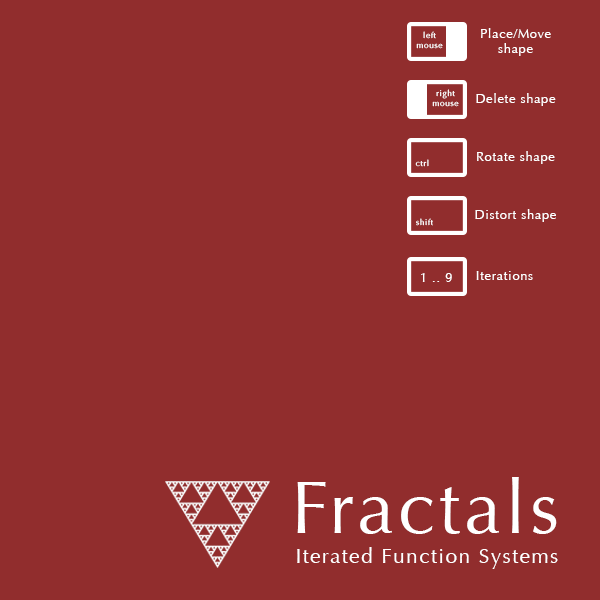
<style>
.page{position:relative;width:600px;height:600px;background:#912d2d}
.page>*{position:absolute;margin:0}
.t1{font:12.5px "Optima-Regular";letter-spacing:0.07em;color:#ffffff}
.t2{font:8.3px "Optima-Regular";letter-spacing:0.07em;color:#ffffff}
.t3{font:20.8px "Optima-Regular";letter-spacing:0.07em;color:#ffffff}
.t4{font:75px "Optima-Regular";letter-spacing:0.05em;color:#ffffff}
</style>
<div class="page">
<p class="t1" style="left:481px;top:28px;width:70px;height:28px;text-align:center">Place/Move<br>shape</p>
<p class="t2" style="left:416px;top:31px;width:27px;height:18px;text-align:center">left<br>mouse</p>
<p class="t2" style="left:432px;top:89px;width:27px;height:18px;text-align:center">right<br>mouse</p>
<p class="t1" style="left:476px;top:93px;width:80px;height:13px">Delete shape</p>
<p class="t2" style="left:415px;top:159px;width:14px;height:8px"><span class="t3"><br></span>ctrl</p>
<p class="t1" style="left:477px;top:151px;width:78px;height:13px">Rotate shape</p>
<p class="t1" style="left:475px;top:209px;width:81px;height:13px">Distort shape</p>
<p class="t2" style="left:416px;top:218px;width:17px;height:8px"><span class="t3"><br></span>shift</p>
<p class="t1" style="left:421px;top:273px;width:31px;height:9px"><span class="t3"><br></span>   1 .. 9</p>
<p class="t1" style="left:476px;top:271px;width:57px;height:9px">Iterations</p>
<p class="t4" style="left:297px;top:477px;width:260px;height:57px">Fractals</p>
<p class="t3" style="left:297px;top:547px;width:261px;height:22px">Iterated Function Systems</p>
</div>
